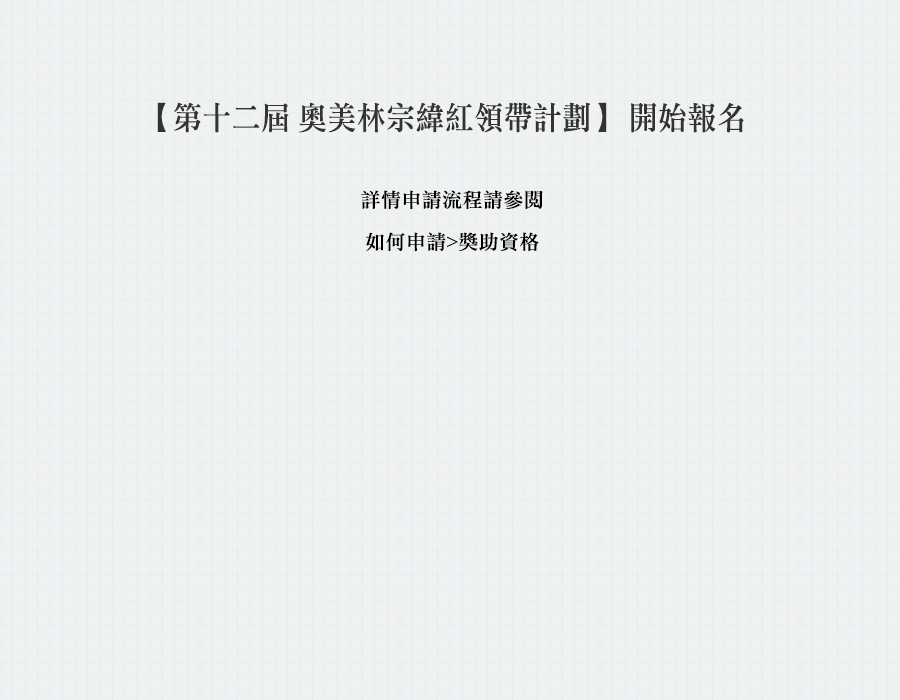
<style>
.page{position:relative;width:900px;height:700px}
.page>*{position:absolute;margin:0}
.t1{font:32px "DFLiSong-Md-HK-BF";letter-spacing:0.02em;color:#333333;scale:0.9 1}
.t2{font:20px/42px "DFLiSong-Md-HK-BF";letter-spacing:0.02em;color:#000000}
</style>
<div class="page">
<p class="t1" style="left:157px;top:102px;width:587px;height:31px">【第十二屆 奧美林宗緯紅領帶計劃】 開始報名</p>
<p class="t2" style="left:361px;top:190px;width:182px;height:62px;text-align:center">詳情申請流程請參閱<br>如何申請&gt;獎助資格</p>
</div>
